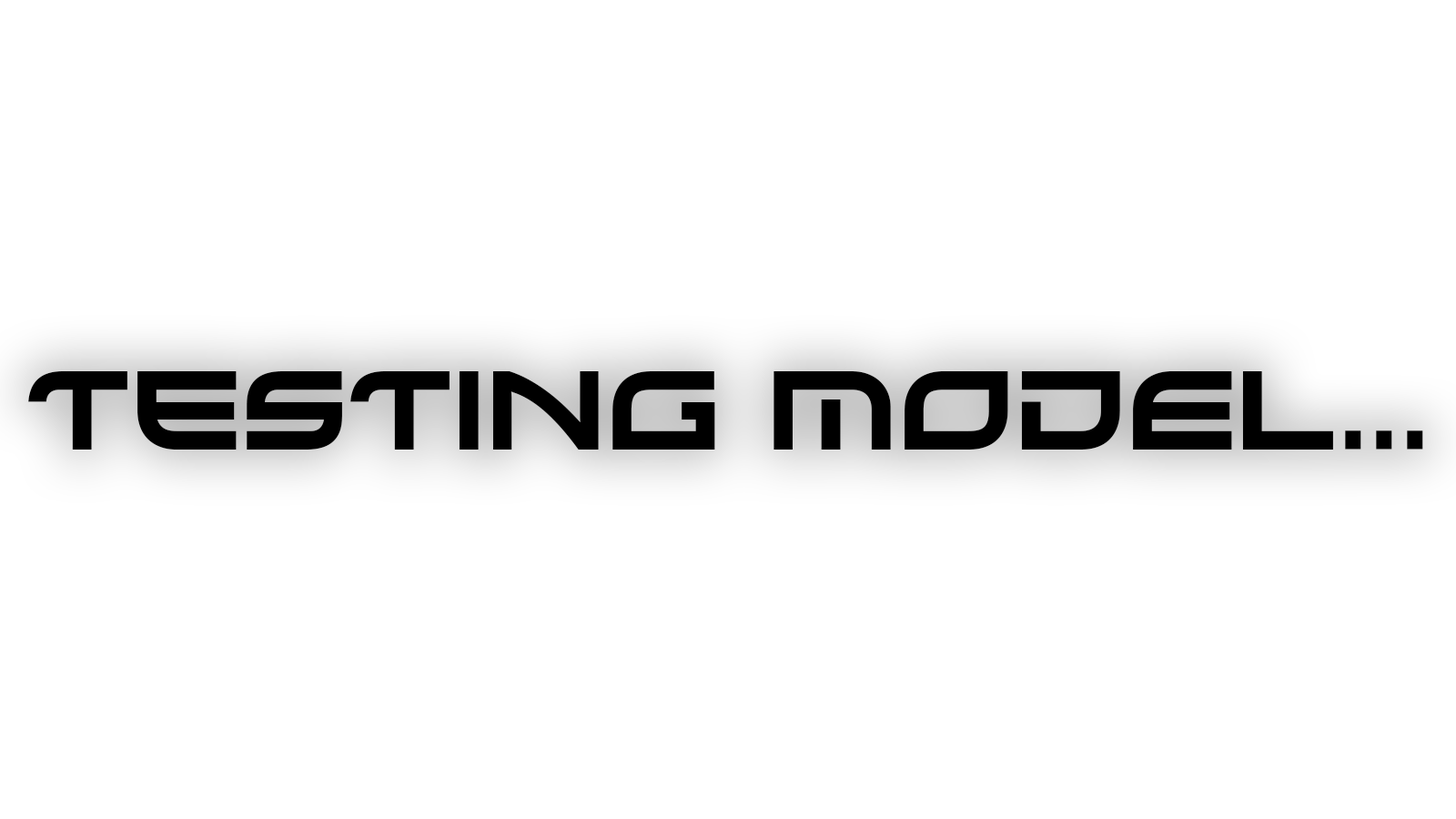
<style>
.page{position:relative;width:1456px;height:819px;background:#ffffff}
.page>*{position:absolute;margin:0}
.t1{font:111.2px "Xirod-Regular";color:#000000}
</style>
<div class="page">
<p class="t1" style="left:28px;top:371px;width:1395px;height:79px">Testing Model...</p>
</div>
